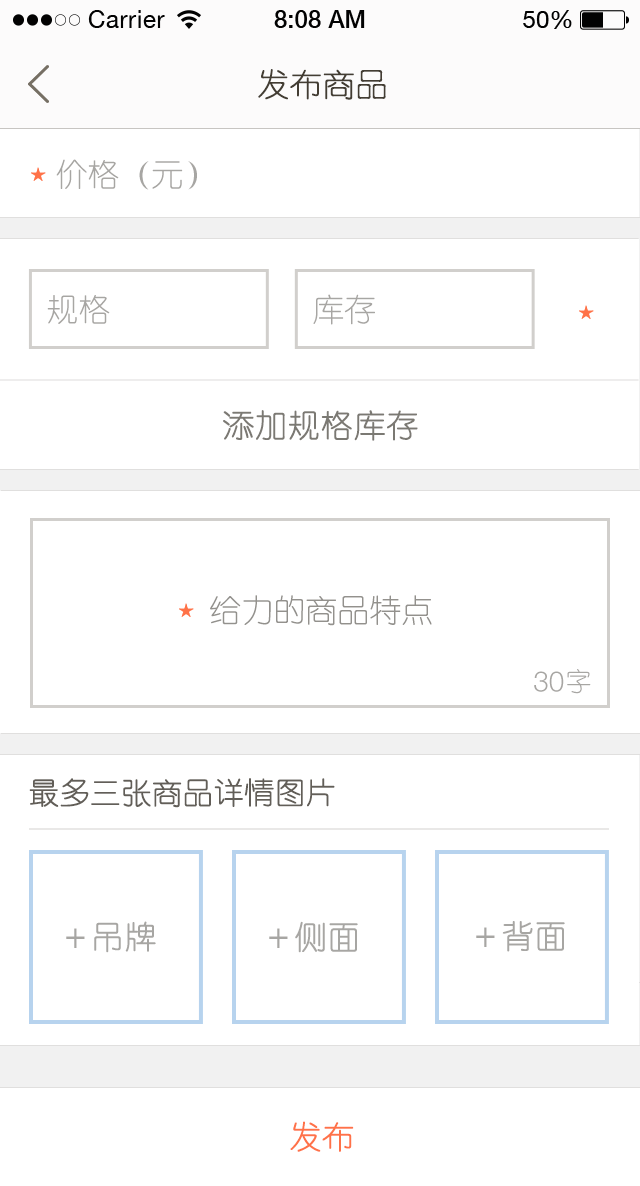
<style>
.page{position:relative;width:640px;height:1186px;background:#ffffff}
.page>*{position:absolute;margin:0}
.t1{font:32px "YouYuan";color:#433d33;text-transform:uppercase;font-weight:bold}
.t2{font:32px "YouYuan";color:#a7a6a3;text-transform:uppercase}
.t3{font:32px "YouYuan";color:#7b7973;text-transform:uppercase;font-weight:bold}
.t4{font:32px "YouYuan";color:#93918d;text-transform:uppercase}
.t5{font:28px "HelveticaNeueLTPro-Lt";color:#a7a6a3;text-transform:uppercase}
.t6{font:26px "YouYuan";color:#a7a6a3;text-transform:uppercase}
.t7{font:30px "YouYuan";color:#625e58;text-transform:uppercase;font-weight:bold}
.t8{font:32px "YouYuan";color:#a7a6a3;text-transform:uppercase;font-weight:bold}
.t9{font:32px "YouYuan";color:#ff7248;text-transform:uppercase;font-weight:bold}
</style>
<div class="page">
<p class="t1" style="left:258px;top:69px;width:128px;height:31px">发布商品</p>
<p class="t2" style="left:56px;top:159px;width:141px;height:31px">价格（元）</p>
<p class="t2" style="left:313px;top:294px;width:62px;height:31px">库存</p>
<p class="t2" style="left:47px;top:295px;width:63px;height:29px">规格</p>
<p class="t3" style="left:223px;top:410px;width:195px;height:31px">添加规格库存</p>
<p class="t4" style="left:210px;top:595px;width:222px;height:31px">给力的商品特点</p>
<p class="t5" style="left:534px;top:671px;width:30px;height:21px">30</p>
<p class="t6" style="left:567px;top:669px;width:24px;height:25px">字</p>
<p class="t7" style="left:29px;top:778px;width:306px;height:30px">最多三张商品详情图片</p>
<p class="t8" style="left:66px;top:921px;width:90px;height:32px">＋吊牌</p>
<p class="t8" style="left:269px;top:921px;width:89px;height:32px">＋侧面</p>
<p class="t8" style="left:476px;top:921px;width:89px;height:31px">＋背面</p>
<p class="t9" style="left:290px;top:1121px;width:64px;height:31px">发布</p>
</div>
